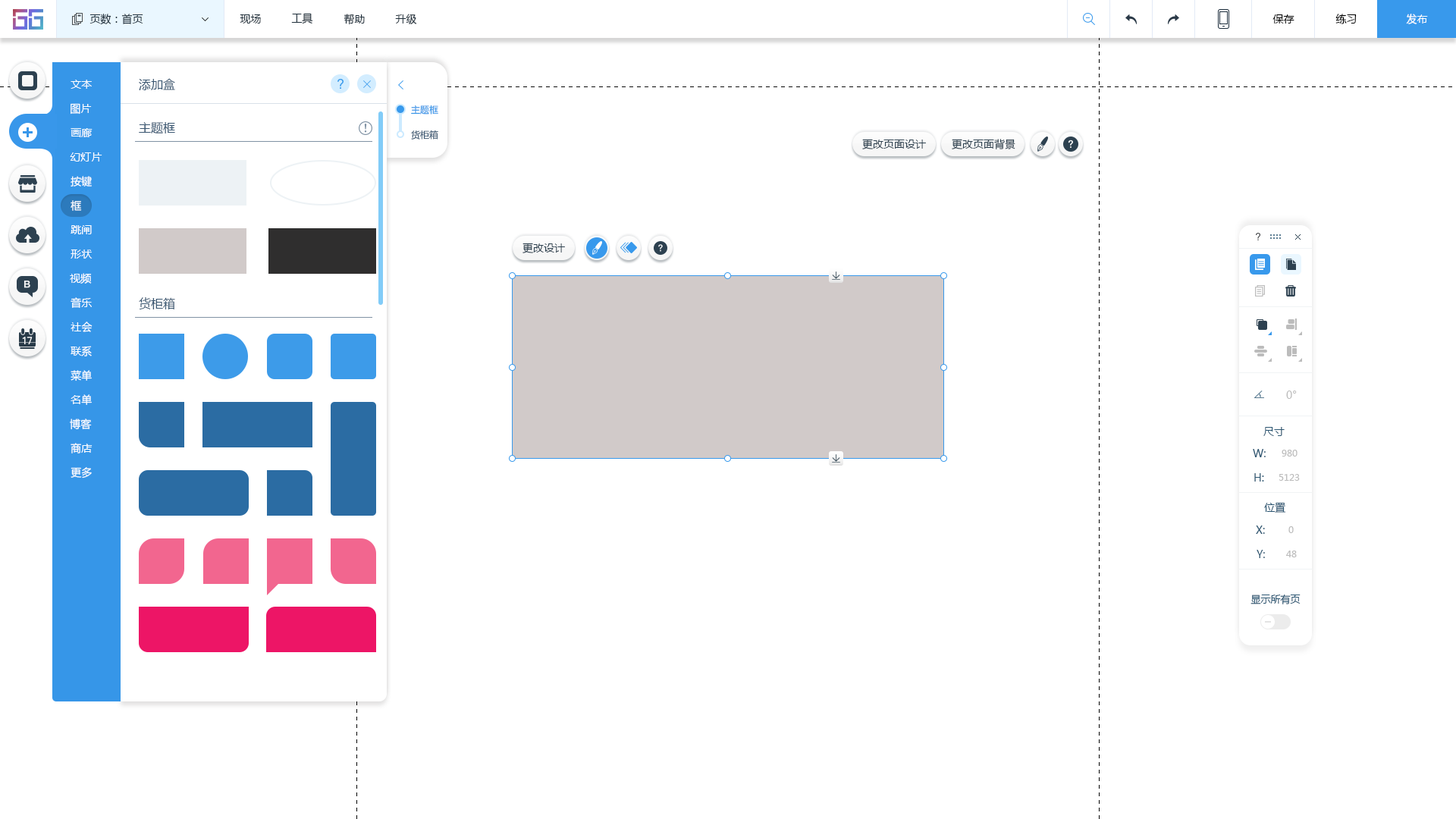
<style>
.page{position:relative;width:1456px;height:819px;background:#ffffff}
.page>*{position:absolute;margin:0}
.t1{font:10.6px "MicrosoftYaHei";color:#20303c}
.t2{font:10.6px "MicrosoftYaHei";color:#000000}
.t3{font:10.6px "MicrosoftYaHei";color:#ffffff}
.t4{font:12.1px "MicrosoftYaHei";color:#395671}
.t5{font:9.1px "MicrosoftYaHei";color:#3696e8}
.t6{font:9.1px "MicrosoftYaHei";color:#395671}
.t7{font:10.6px "MicrosoftYaHei";color:#2d4150}
.t8{font:10.6px "MicrosoftYaHei";color:#bcbcbc}
.t9{font:10.6px "MicrosoftYaHei";color:#2b5672}
.t10{font:9.1px "MicrosoftYaHei";color:#bcbcbc}
.t11{font:9.9px "MicrosoftYaHei";color:#2b5672}
</style>
<div class="page">
<p class="t1" style="left:89px;top:14px;width:54px;height:11px">页数：首页</p>
<p class="t1" style="left:240px;top:14px;width:21px;height:10px">现场</p>
<p class="t1" style="left:291px;top:13px;width:22px;height:11px">工具</p>
<p class="t1" style="left:344px;top:14px;width:21px;height:11px">帮助</p>
<p class="t1" style="left:395px;top:14px;width:22px;height:10px">升级</p>
<p class="t2" style="left:1272px;top:14px;width:22px;height:10px">保存</p>
<p class="t2" style="left:1335px;top:14px;width:22px;height:10px">练习</p>
<p class="t3" style="left:1406px;top:14px;width:22px;height:10px">发布</p>
<p class="t3" style="left:71px;top:80px;width:21px;height:9px">文本</p>
<p class="t4" style="left:139px;top:78px;width:36px;height:12px">添加盒</p>
<p class="t3" style="left:71px;top:103px;width:21px;height:12px">图片</p>
<p class="t5" style="left:411px;top:105px;width:27px;height:10px">主题框</p>
<p class="t4" style="left:139px;top:122px;width:36px;height:11px">主题框</p>
<p class="t3" style="left:71px;top:128px;width:22px;height:9px">画廊</p>
<p class="t6" style="left:411px;top:130px;width:27px;height:10px">货柜箱</p>
<p class="t7" style="left:862px;top:139px;width:64px;height:10px">更改页面设计</p>
<p class="t7" style="left:952px;top:139px;width:63px;height:10px">更改页面背景</p>
<p class="t3" style="left:70px;top:152px;width:32px;height:10px">幻灯片</p>
<p class="t3" style="left:71px;top:176px;width:21px;height:11px">按键</p>
<p class="t3" style="left:71px;top:200px;width:11px;height:11px">框</p>
<p class="t3" style="left:71px;top:225px;width:21px;height:9px">跳闸</p>
<p class="t7" style="left:522px;top:243px;width:43px;height:10px">更改设计</p>
<p class="t3" style="left:71px;top:249px;width:22px;height:10px">形状</p>
<p class="t3" style="left:70px;top:273px;width:22px;height:11px">视频</p>
<p class="t3" style="left:71px;top:297px;width:21px;height:11px">音乐</p>
<p class="t4" style="left:139px;top:297px;width:36px;height:13px">货柜箱</p>
<p class="t3" style="left:71px;top:322px;width:22px;height:10px">社会</p>
<p class="t3" style="left:71px;top:346px;width:21px;height:10px">联系</p>
<p class="t3" style="left:71px;top:370px;width:21px;height:11px">菜单</p>
<p class="t3" style="left:71px;top:394px;width:21px;height:11px">名单</p>
<p class="t8" style="left:1286px;top:391px;width:11px;height:8px">0°</p>
<p class="t3" style="left:70px;top:419px;width:22px;height:11px">博客</p>
<p class="t9" style="left:1263px;top:427px;width:22px;height:9px">尺寸</p>
<p class="t3" style="left:71px;top:443px;width:22px;height:10px">商店</p>
<p class="t9" style="left:1253px;top:449px;width:13px;height:8px">W:</p>
<p class="t10" style="left:1282px;top:450px;width:15px;height:7px">980</p>
<p class="t3" style="left:71px;top:467px;width:21px;height:12px">更多</p>
<p class="t9" style="left:1254px;top:473px;width:10px;height:9px">H:</p>
<p class="t10" style="left:1279px;top:474px;width:21px;height:7px">5123</p>
<p class="t9" style="left:1264px;top:502px;width:22px;height:11px">位置</p>
<p class="t9" style="left:1256px;top:526px;width:9px;height:8px">X:</p>
<p class="t10" style="left:1288px;top:526px;width:6px;height:7px">0</p>
<p class="t9" style="left:1257px;top:550px;width:8px;height:8px">Y:</p>
<p class="t10" style="left:1286px;top:551px;width:11px;height:6px">48</p>
<p class="t11" style="left:1250px;top:594px;width:51px;height:10px">显示所有页</p>
</div>
